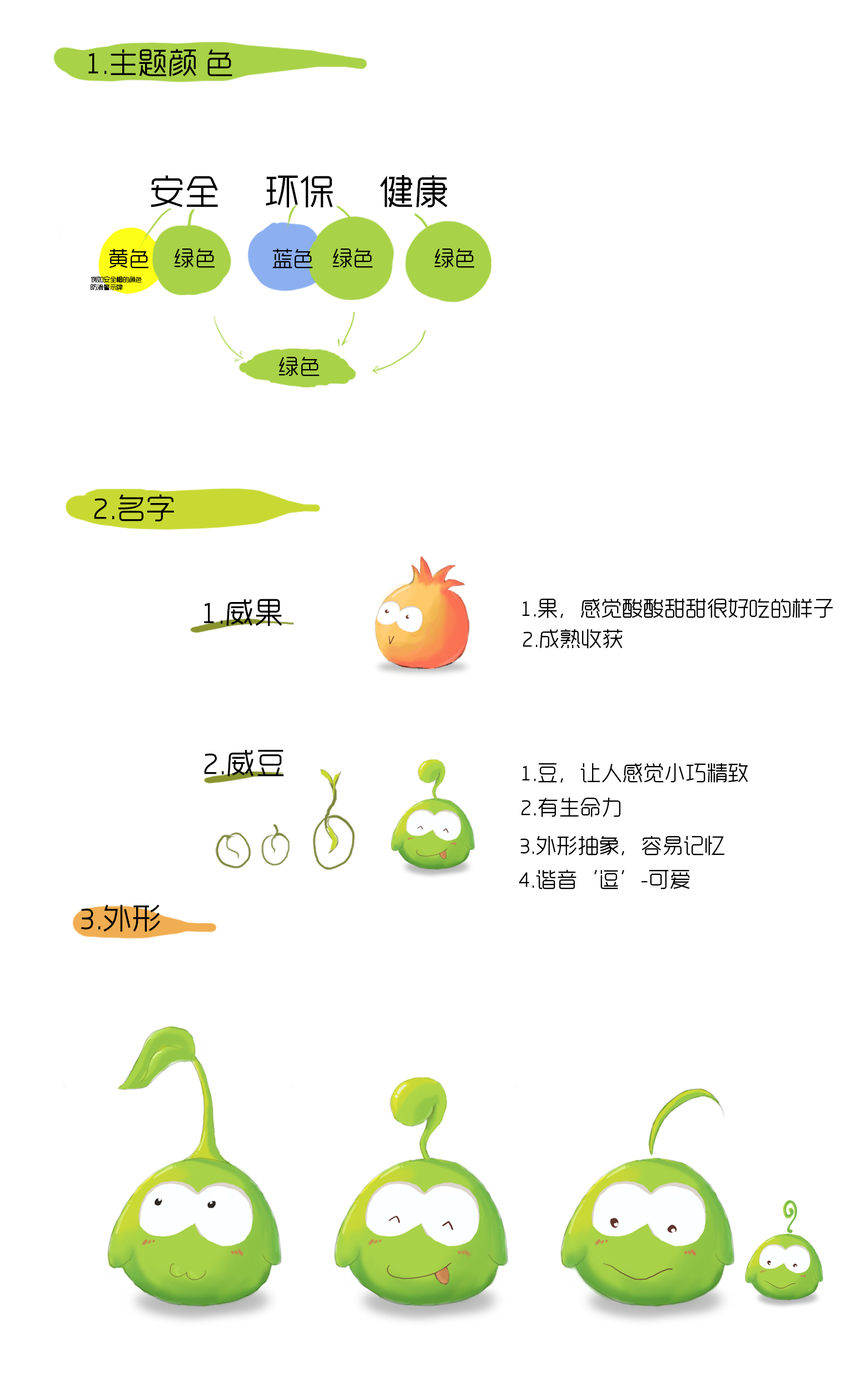
<style>
.page{position:relative;width:865px;height:1378px;background:#ffffff}
.page>*{position:absolute;margin:0}
.t1{font:29.5px "RTWSYueGoTrial-Regular";color:#000000}
.t2{font:35.1px "RTWSYueGoTrial-Regular";color:#000000}
.t3{font:21.2px "RTWSYueGoTrial-Regular";color:#000000}
.t4{font:6.4px "RTWSYueGoTrial-Regular";color:#000000}
</style>
<div class="page">
<p class="t1" style="left:88px;top:49px;width:144px;height:27px">1.主题颜 色</p>
<p class="t2" style="left:151px;top:175px;width:297px;height:33px">安全　 环保　 健康</p>
<p class="t3" style="left:109px;top:249px;width:39px;height:20px">黄色</p>
<p class="t3" style="left:174px;top:248px;width:41px;height:20px">绿色</p>
<p class="t3" style="left:272px;top:249px;width:40px;height:20px">蓝色</p>
<p class="t3" style="left:332px;top:248px;width:41px;height:20px">绿色</p>
<p class="t3" style="left:434px;top:248px;width:40px;height:20px">绿色</p>
<p class="t4" style="left:91px;top:276px;width:51px;height:7px">例如安全帽的颜色</p>
<p class="t4" style="left:91px;top:284px;width:32px;height:7px">防滑警示牌</p>
<p class="t3" style="left:279px;top:356px;width:40px;height:20px">绿色</p>
<p class="t1" style="left:94px;top:494px;width:80px;height:28px">2.名字</p>
<p class="t1" style="left:204px;top:599px;width:78px;height:27px">1.威果</p>
<p class="t3" style="left:523px;top:598px;width:310px;height:20px">1.果，感觉酸酸甜甜很好吃的样子</p>
<p class="t3" style="left:523px;top:629px;width:100px;height:20px">2.成熟收获</p>
<p class="t1" style="left:204px;top:750px;width:80px;height:27px">2.威豆</p>
<p class="t3" style="left:523px;top:763px;width:225px;height:20px">1.豆，让人感觉小巧精致</p>
<p class="t3" style="left:522px;top:797px;width:98px;height:20px">2.有生命力</p>
<p class="t3" style="left:520px;top:836px;width:204px;height:20px">3.外形抽象，容易记忆</p>
<p class="t3" style="left:519px;top:870px;width:171px;height:20px">4.谐音‘逗’-可爱</p>
<p class="t1" style="left:81px;top:905px;width:79px;height:27px">3.外形</p>
</div>
